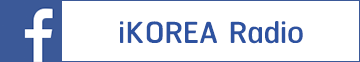
<style>
.page{position:relative;width:360px;height:62px;background:#ffffff}
.page>*{position:absolute;margin:0}
.t1{font:38px "RSU";color:#2d52a0}
</style>
<div class="page">
<p class="t1" style="left:120px;top:21px;width:183px;height:23px">iKOREA Radio</p>
</div>
